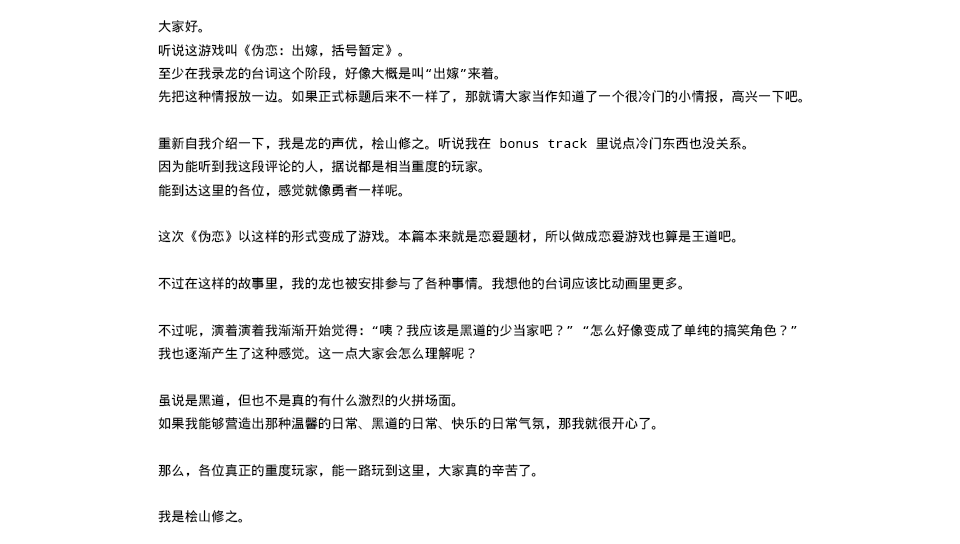
<style>
.page{position:relative;width:960px;height:544px;background:#ffffff}
.page>*{position:absolute;margin:0}
.t1{font:13.3px "WenQuanYiMicroHeiMono";color:#000000}
</style>
<div class="page">
<p class="t1" style="left:158px;top:20px;width:645px;height:503px">大家好。<br>听说这游戏叫《伪恋：出嫁，括号暂定》。<br>至少在我录龙的台词这个阶段，好像大概是叫“出嫁”来着。<br>先把这种情报放一边。如果正式标题后来不一样了，那就请大家当作知道了一个很冷门的小情报，高兴一下吧。<br><br>重新自我介绍一下，我是龙的声优，桧山修之。听说我在 bonus track 里说点冷门东西也没关系。<br>因为能听到我这段评论的人，据说都是相当重度的玩家。<br>能到达这里的各位，感觉就像勇者一样呢。<br><br>这次《伪恋》以这样的形式变成了游戏。本篇本来就是恋爱题材，所以做成恋爱游戏也算是王道吧。<br><br>不过在这样的故事里，我的龙也被安排参与了各种事情。我想他的台词应该比动画里更多。<br><br>不过呢，演着演着我渐渐开始觉得：“咦？我应该是黑道的少当家吧？” “怎么好像变成了单纯的搞笑角色？”<br>我也逐渐产生了这种感觉。这一点大家会怎么理解呢？<br><br>虽说是黑道，但也不是真的有什么激烈的火拼场面。<br>如果我能够营造出那种温馨的日常、黑道的日常、快乐的日常气氛，那我就很开心了。<br><br>那么，各位真正的重度玩家，能一路玩到这里，大家真的辛苦了。<br><br>我是桧山修之。</p>
</div>
